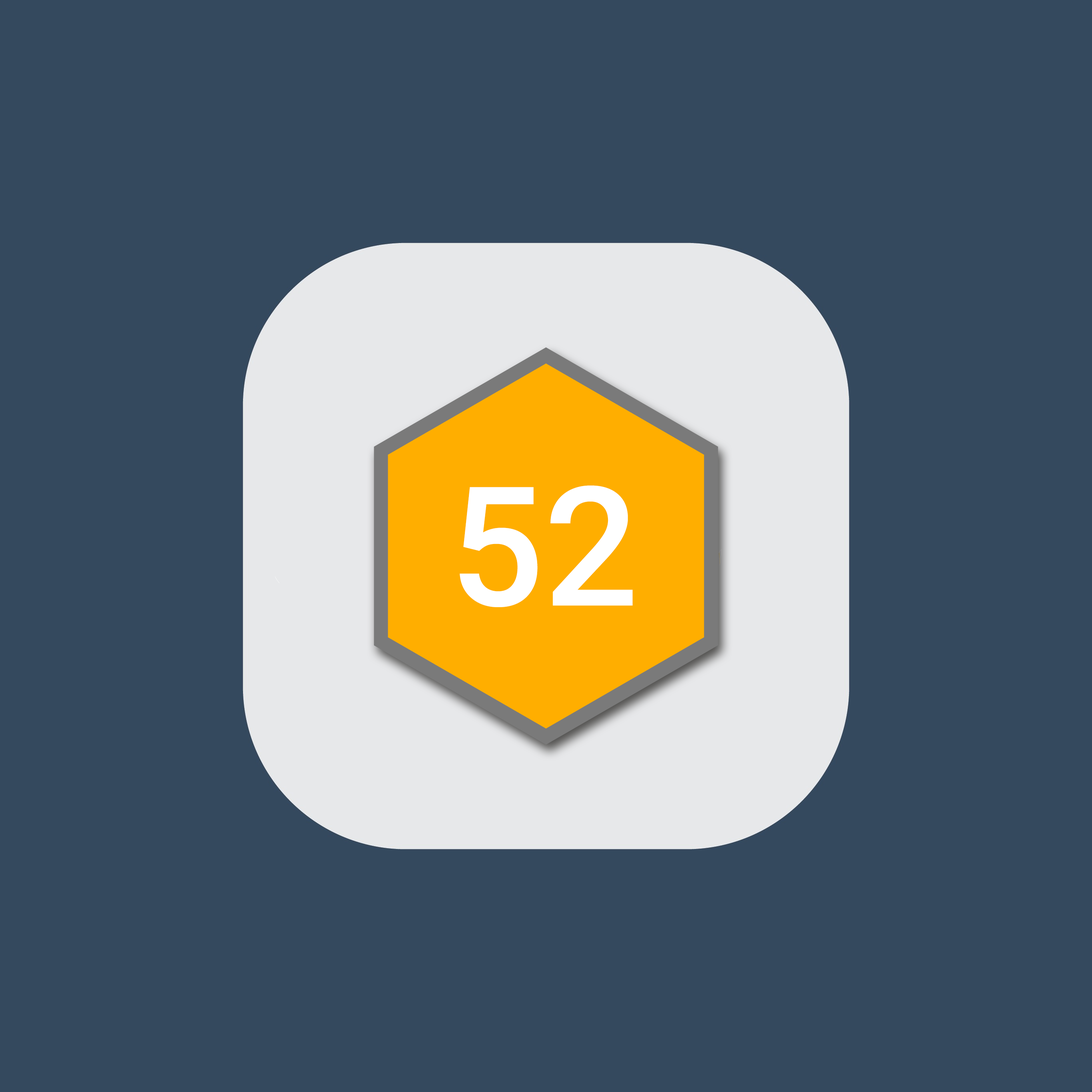
<style>
.page{position:relative;width:1092px;height:1092px;background:#34495e}
.page>*{position:absolute;margin:0}
.t1{font:166.5px "Roboto-Medium";color:#ffffff}
</style>
<div class="page">
<p class="t1" style="left:460px;top:485px;width:173px;height:122px">52</p>
</div>
